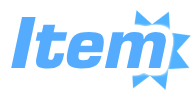
<style>
.page{position:relative;width:195px;height:100px;background:#ffffff}
.page>*{position:absolute;margin:0}
.t1{font:68px "Eurostile-BoldOblique";color:#55acff}
</style>
<div class="page">
<p class="t1" style="left:11px;top:16px;width:155px;height:53px">Item</p>
</div>
